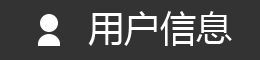
<style>
.page{position:relative;width:260px;height:60px;background:#333333}
.page>*{position:absolute;margin:0}
.t1{font:36px "MicrosoftYaHei";color:#ffffff}
</style>
<div class="page">
<p class="t1" style="left:88px;top:11px;width:144px;height:35px">用户信息</p>
</div>
